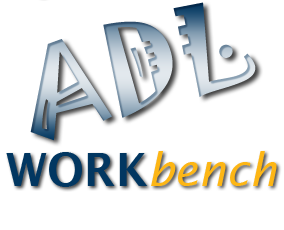
<style>
.page{position:relative;width:284px;height:230px;background:#ffffff}
.page>*{position:absolute;margin:0}
.t1{font:106.7px "Jokerman-Regular"}
.t2{font:45.3px "LucidaSans-Demi";color:#023761}
.t3{font:45.3px "LucidaSans-Italic";color:#fdb615}
</style>
<div class="page">
<p class="t1" style="left:30px;top:2px;width:226px;height:139px;rotate:-15deg">ADL</p>
<p class="t2" style="left:6px;top:152px;width:142px;height:35px">WORK</p>
<p class="t3" style="left:151px;top:151px;width:126px;height:35px">bench</p>
</div>
